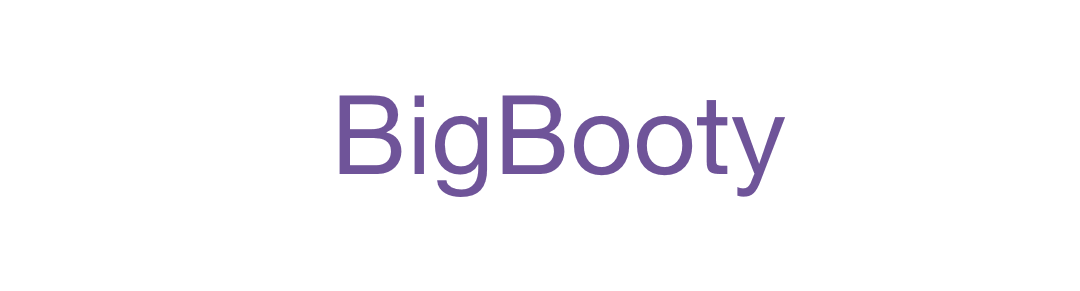
<style>
.page{position:relative;width:1080px;height:291px;background:#ffffff}
.page>*{position:absolute;margin:0}
.t1{font:110px "HelveticaNeue";color:#6f5499}
</style>
<div class="page">
<p class="t1" style="left:339px;top:95px;width:446px;height:102px">BigBooty</p>
</div>
